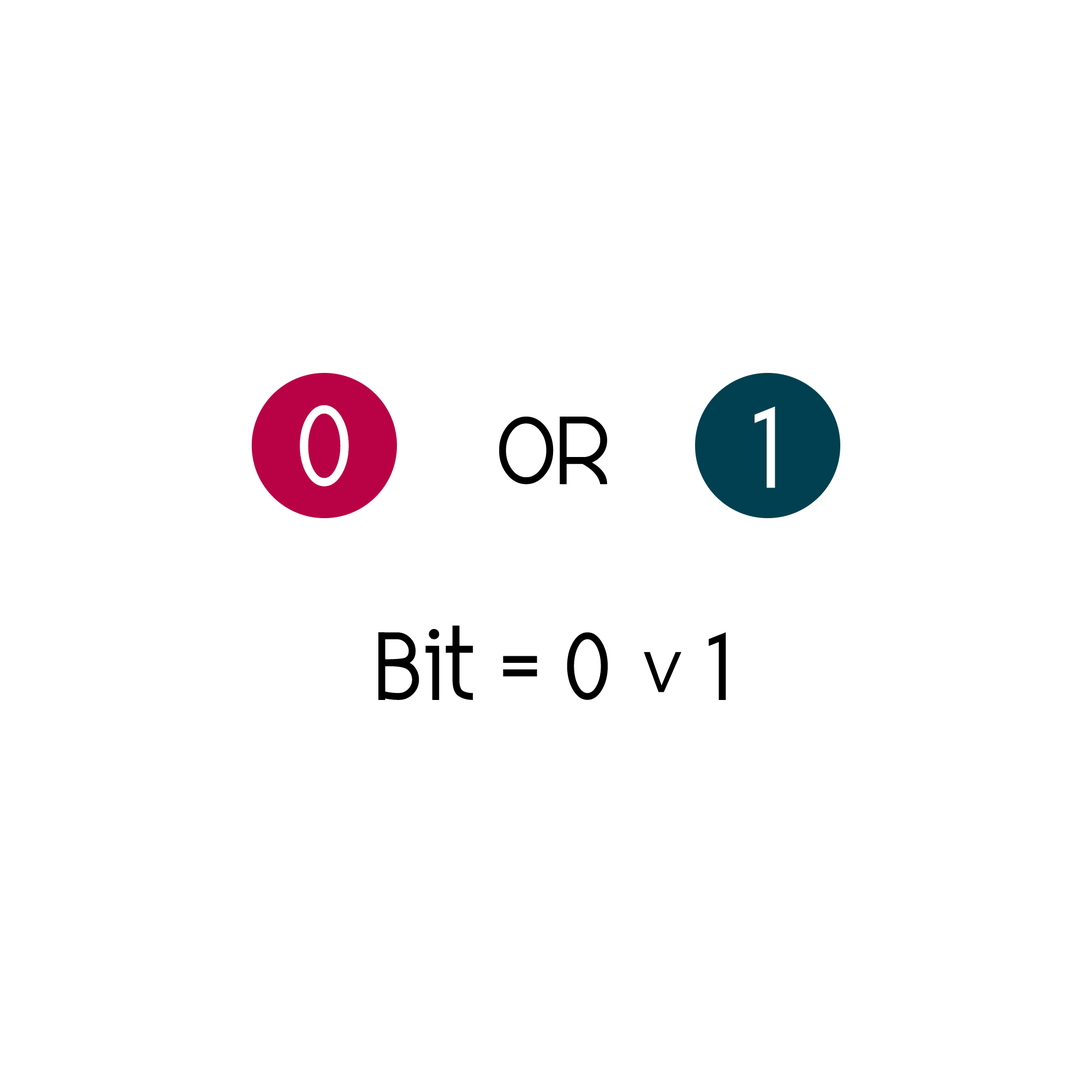
<style>
.page{position:relative;width:1092px;height:1092px;background:#ffffff}
.page>*{position:absolute;margin:0}
.t1{font:82.8px "EleganTech";color:#ffffff}
.t2{font:69px "EleganTech";color:#000000}
.t3{font:69px "Cambria";color:#000000}
</style>
<div class="page">
<p class="t1" style="left:300px;top:405px;width:49px;height:81px">0</p>
<p class="t1" style="left:755px;top:406px;width:20px;height:82px">1</p>
<p class="t2" style="left:499px;top:417px;width:108px;height:67px">OR</p>
<p class="t2" style="left:378px;top:625px;width:348px;height:75px">Bit = 0    1</p>
<p class="t3" style="left:644px;top:652px;width:37px;height:40px">∨</p>
</div>
